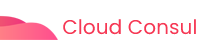
<style>
.page{position:relative;width:200px;height:40px;background:#ffffff}
.page>*{position:absolute;margin:0}
.t1{font:20px "Poppins-Regular";letter-spacing:0.005em;color:#f63854}
</style>
<div class="page">
<p class="t1" style="left:63px;top:19px;width:133px;height:16px">Cloud Consul</p>
</div>
